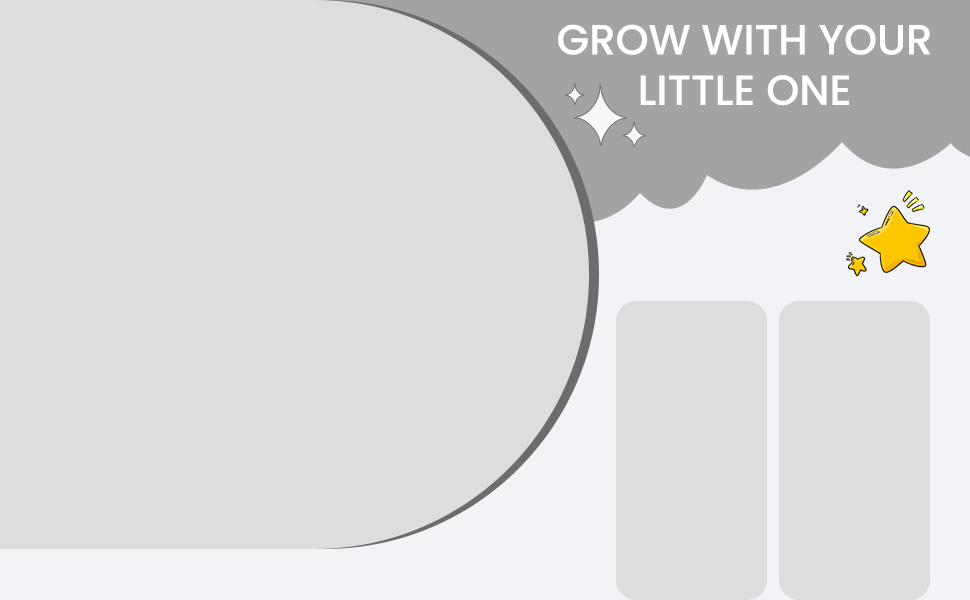
<style>
.page{position:relative;width:970px;height:600px;background:#dcdddf}
.page>*{position:absolute;margin:0}
.t1{font:42px "Poppins-Medium";color:#ffffff}
</style>
<div class="page">
<p class="t1" style="left:558px;top:24px;width:373px;height:82px;text-align:center">GROW WITH YOUR<br>LITTLE ONE</p>
</div>
